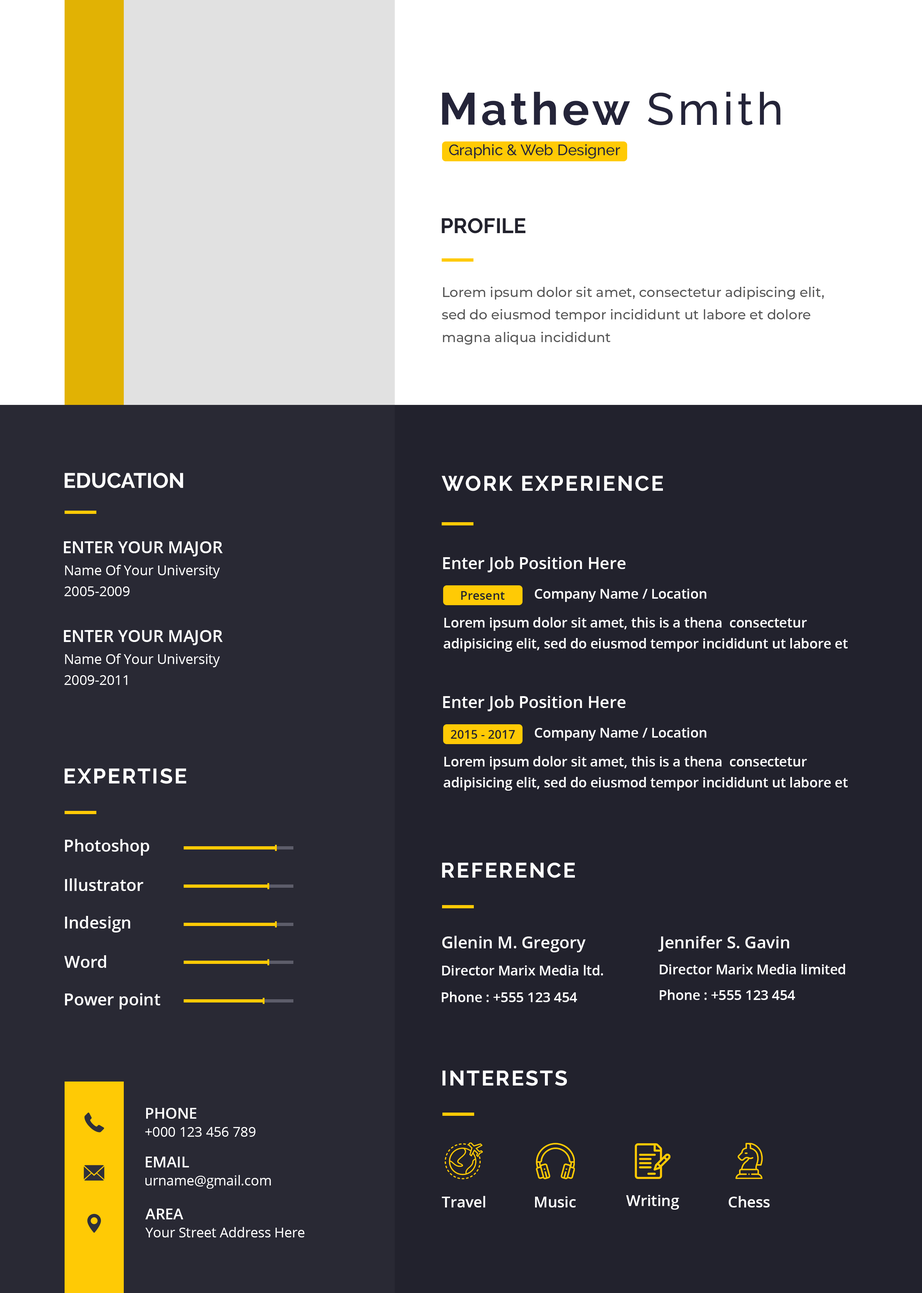
<style>
.page{position:relative;width:922px;height:1293px;background:#22222d}
.page>*{position:absolute;margin:0}
.t1{font:45.1px "Raleway-Bold";letter-spacing:0.08em;color:#242439}
.t2{font:45.1px "Raleway-Medium";letter-spacing:0.08em;color:#242439}
.t3{font:15px "Raleway-Medium";color:#242439}
.t4{font:21.1px "Raleway-Bold";color:#22222d;text-transform:uppercase}
.t5{font:13.5px/22.6px "Montserrat-Medium";color:#555555}
.t6{font:21.1px "Raleway-Bold";color:#ffffff;text-transform:uppercase}
.t7{font:21.1px "Raleway-Bold";letter-spacing:0.08em;color:#ffffff;text-transform:uppercase}
.t8{font:16.5px "OpenSans-Semibold";color:#ffffff;text-transform:uppercase}
.t9{font:16.5px "OpenSans-Semibold";color:#ffffff}
.t10{font:13.5px/21.1px "OpenSans";color:#ffffff}
.t11{font:12px "OpenSans-Semibold";color:#22222d}
.t12{font:13.5px "OpenSans-Semibold";color:#ffffff}
.t13{font:13.5px/21.1px "OpenSans-Semibold";color:#ffffff}
.t14{font:13.5px/18px "OpenSans";color:#ffffff}
.t15{font:15px/18px "OpenSans-Semibold";color:#ffffff;text-transform:uppercase}
.t16{font:15px "OpenSans-Semibold";color:#ffffff}
</style>
<div class="page">
<p class="t1" style="left:442px;top:92px;width:339px;height:34px">Mathew <span class="t2">Smith</span></p>
<p class="t3" style="left:449px;top:144px;width:171px;height:15px">Graphic &amp; Web Designer</p>
<p class="t4" style="left:442px;top:218px;width:83px;height:16px">Profile</p>
<p class="t5" style="left:442px;top:287px;width:382px;height:58px">Lorem ipsum dolor sit amet, consectetur adipiscing elit, sed do eiusmod tempor incididunt ut labore et dolore magna aliqua incididunt</p>
<p class="t6" style="left:65px;top:473px;width:118px;height:15px">education</p>
<p class="t7" style="left:442px;top:476px;width:221px;height:15px">work experience</p>
<p class="t8" style="left:64px;top:541px;width:159px;height:16px">Enter your major</p>
<p class="t9" style="left:443px;top:557px;width:183px;height:15px">Enter Job Position Here</p>
<p class="t10" style="left:64px;top:565px;width:156px;height:31px">Name Of Your University<br>2005-2009</p>
<p class="t11" style="left:461px;top:591px;width:44px;height:9px">Present</p>
<p class="t12" style="left:535px;top:589px;width:172px;height:13px">Company Name / Location</p>
<p class="t13" style="left:444px;top:617px;width:404px;height:35px">Lorem ipsum dolor sit amet, this is a thena  consectetur adipisicing elit, sed do eiusmod tempor incididunt ut labore et dolore</p>
<p class="t8" style="left:64px;top:630px;width:159px;height:15px">Enter your major</p>
<p class="t10" style="left:64px;top:654px;width:156px;height:31px">Name Of Your University<br>2009-2011</p>
<p class="t9" style="left:443px;top:695px;width:183px;height:16px">Enter Job Position Here</p>
<p class="t11" style="left:451px;top:730px;width:64px;height:9px">2015 - 2017</p>
<p class="t12" style="left:535px;top:728px;width:172px;height:13px">Company Name / Location</p>
<p class="t13" style="left:444px;top:756px;width:404px;height:35px">Lorem ipsum dolor sit amet, this is a thena  consectetur adipisicing elit, sed do eiusmod tempor incididunt ut labore et dolore</p>
<p class="t7" style="left:65px;top:768px;width:121px;height:16px">expertise</p>
<p class="t9" style="left:65px;top:839px;width:84px;height:17px">Photoshop</p>
<p class="t7" style="left:442px;top:863px;width:133px;height:15px">reference</p>
<p class="t9" style="left:65px;top:878px;width:78px;height:13px">Illustrator</p>
<p class="t9" style="left:65px;top:916px;width:65px;height:17px">Indesign</p>
<p class="t9" style="left:442px;top:936px;width:144px;height:16px">Glenin M. Gregory</p>
<p class="t9" style="left:658px;top:936px;width:131px;height:16px">Jennifer S. Gavin</p>
<p class="t9" style="left:64px;top:955px;width:42px;height:13px">Word</p>
<p class="t12" style="left:442px;top:965px;width:161px;height:11px">Director Marix Media ltd.</p>
<p class="t12" style="left:660px;top:964px;width:185px;height:10px">Director Marix Media limited</p>
<p class="t12" style="left:660px;top:990px;width:135px;height:10px">Phone : +555 123 454</p>
<p class="t9" style="left:65px;top:993px;width:95px;height:16px">Power point</p>
<p class="t12" style="left:442px;top:992px;width:135px;height:10px">Phone : +555 123 454</p>
<p class="t7" style="left:442px;top:1070px;width:125px;height:16px">interests</p>
<p class="t14" style="left:145px;top:1108px;width:111px;height:29px"><span class="t15">Phone<br></span>+000 123 456 789</p>
<p class="t14" style="left:145px;top:1157px;width:126px;height:32px"><span class="t15">email<br></span>urname@gmail.com</p>
<p class="t16" style="left:442px;top:1196px;width:43px;height:12px">Travel</p>
<p class="t16" style="left:535px;top:1196px;width:41px;height:12px">Music</p>
<p class="t16" style="left:626px;top:1195px;width:53px;height:15px">Writing</p>
<p class="t16" style="left:729px;top:1196px;width:41px;height:12px">Chess</p>
<p class="t14" style="left:145px;top:1209px;width:160px;height:29px"><span class="t15">area<br></span>Your Street Address Here</p>
</div>
